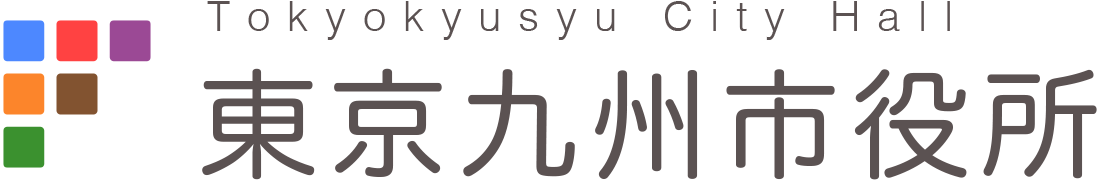
<style>
.page{position:relative;width:1100px;height:180px;background:#ffffff}
.page>*{position:absolute;margin:0}
.t1{font:42px "Helvetica-Light";letter-spacing:0.4em;color:#5b5252}
.t2{font:118.5px "HiraMaruPro-W4";letter-spacing:0.1em;color:#5b5252}
</style>
<div class="page">
<p class="t1" style="left:207px;top:1px;width:743px;height:39px">Tokyokyusyu City Hall</p>
<p class="t2" style="left:202px;top:68px;width:895px;height:112px">東京九州市役所</p>
</div>
